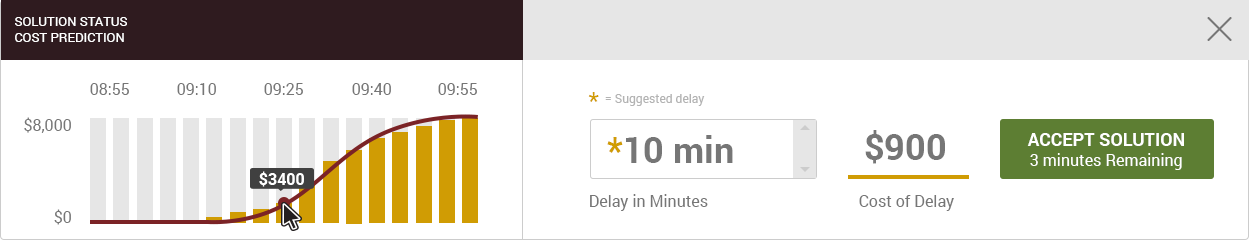
<style>
.page{position:relative;width:1249px;height:240px;background:#ffffff}
.page>*{position:absolute;margin:0}
.t1{font:13px "Roboto-Regular";color:#ffffff;text-transform:uppercase}
.t2{font:16px "Roboto-Regular";color:#767676}
.t3{font:12px "Roboto-Regular";color:#b3b3b3}
.t4{font:24px "Roboto-Regular";color:#d09c04}
.t5{font:36px "Roboto-Bold";color:#767676}
.t6{font:36px "Roboto-Bold";color:#d09c04}
.t7{font:18px "Roboto-Bold";color:#ffffff;text-transform:uppercase}
.t8{font:16px "Roboto-Regular";color:#ffffff}
.t9{font:16px "Roboto-Bold";color:#ffffff}
</style>
<div class="page">
<p class="t1" style="left:15px;top:17px;width:112px;height:25px">Solution Status<br>Cost Prediction</p>
<p class="t2" style="left:90px;top:83px;width:39px;height:12px">08:55</p>
<p class="t2" style="left:177px;top:83px;width:39px;height:12px">09:10</p>
<p class="t2" style="left:264px;top:83px;width:39px;height:12px">09:25</p>
<p class="t2" style="left:352px;top:83px;width:39px;height:12px">09:40</p>
<p class="t2" style="left:438px;top:83px;width:39px;height:12px">09:55</p>
<p class="t3" style="left:588px;top:92px;width:117px;height:14px"><span class="t4">* </span>= Suggested delay</p>
<p class="t2" style="left:24px;top:117px;width:47px;height:16px">$8,000</p>
<p class="t5" style="left:607px;top:135px;width:126px;height:28px"><span class="t6">*</span>10 min</p>
<p class="t5" style="left:865px;top:130px;width:80px;height:34px">$900</p>
<p class="t7" style="left:1027px;top:133px;width:157px;height:13px">Accept Solution</p>
<p class="t8" style="left:1030px;top:153px;width:152px;height:17px">3 minutes Remaining</p>
<p class="t9" style="left:259px;top:171px;width:45px;height:16px">$3400</p>
<p class="t2" style="left:590px;top:194px;width:118px;height:17px">Delay in Minutes</p>
<p class="t2" style="left:859px;top:195px;width:95px;height:16px">Cost of Delay</p>
<p class="t2" style="left:54px;top:209px;width:17px;height:16px">$0</p>
</div>
